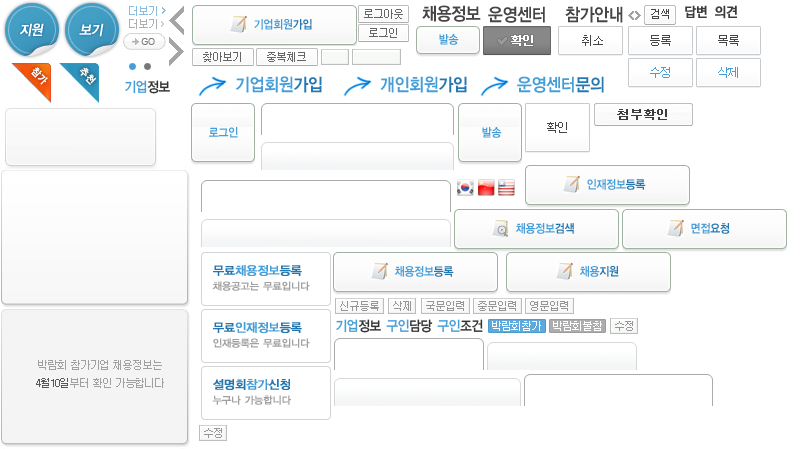
<style>
.page{position:relative;width:800px;height:449px;background:#ffffff}
.page>*{position:absolute;margin:0}
.t1{font:18px "YDIYGO140-KSCpc-EUC-H";letter-spacing:-0.1em;color:#454545;scale:0.9 1}
.t2{font:14px "YDIYGO130-KSCpc-EUC-H";letter-spacing:-0.1em;color:#3b3b3b;font-weight:bold;scale:0.9 1}
.t3{font:14px "YDIYGO130-KSCpc-EUC-H";letter-spacing:-0.1em;color:#ffffff;font-weight:bold;font-style:italic;scale:0.9 1}
.t4{font:12px "YDIYGO140-KSCpc-EUC-H";letter-spacing:-0.1em;color:#469ed9;scale:0.9 1}
.t5{font:12px "Dotum";letter-spacing:-0.1em;color:#454545}
.t6{font:10px "YDIYGO130-KSCpc-EUC-H";letter-spacing:-0.05em;color:#ffffff;font-weight:bold;scale:0.9 1}
.t7{font:18px "YDIYGO140-KSCpc-EUC-H";letter-spacing:-0.1em;color:#469ed9;scale:0.9 1}
.t8{font:18px "YDIYGO140-KSCpc-EUC-H";letter-spacing:-0.1em;color:#2479b2;scale:0.9 1}
.t9{font:12px "Dotum";letter-spacing:-0.1em;color:#469ed9}
.t10{font:14px "YDIYGO130-KSCpc-EUC-H";letter-spacing:-0.1em;color:#469ed9;scale:0.9 1}
.t11{font:14px "YDIYGO130-KSCpc-EUC-H";letter-spacing:-0.1em;color:#333333;scale:0.9 1}
.t12{font:12px "Dotum";color:#3e3c3e;font-weight:bold}
.t13{font:12px "YDIYGO140-KSCpc-EUC-H";letter-spacing:-0.1em;color:#2677ae;scale:0.9 1}
.t14{font:12px "YDIYGO130-KSCpc-EUC-H";letter-spacing:-0.1em;color:#469ed9;font-weight:bold}
.t15{font:12px "YDIYGO130-KSCpc-EUC-H";letter-spacing:-0.1em;color:#2476ad;font-weight:bold}
.t16{font:10px "YDIYGO130-KSCpc-EUC-H";letter-spacing:-0.1em;color:#a1a1a1;font-weight:bold}
.t17{font:11px "Dotum";letter-spacing:-0.1em;color:#969696}
.t18{font:11px "Dotum";letter-spacing:-0.1em;color:#ffffff}
</style>
<div class="page">
<p class="t1" style="left:422px;top:5px;width:59px;height:17px">채용정보</p>
<p class="t1" style="left:488px;top:6px;width:57px;height:17px">운영센터</p>
<p class="t1" style="left:565px;top:6px;width:58px;height:17px">참가안내</p>
<p class="t2" style="left:685px;top:5px;width:22px;height:13px">답변</p>
<p class="t2" style="left:715px;top:5px;width:22px;height:14px">의견</p>
<p class="t3" style="left:20px;top:23px;width:24px;height:14px">지원</p>
<p class="t3" style="left:79px;top:23px;width:25px;height:14px">보기</p>
<p class="t4" style="left:439px;top:34px;width:20px;height:11px">발송</p>
<p class="t5" style="left:650px;top:35px;width:21px;height:11px">등록</p>
<p class="t5" style="left:718px;top:35px;width:21px;height:11px">목록</p>
<p class="t6" style="left:31px;top:67px;width:17px;height:18px;rotate:45deg">참가</p>
<p class="t6" style="left:79px;top:67px;width:18px;height:18px;rotate:45deg">추천</p>
<p class="t7" style="left:235px;top:76px;width:87px;height:17px">기업회원<span class="t8">가입</span></p>
<p class="t7" style="left:380px;top:76px;width:87px;height:17px">개인회원<span class="t8">가입</span></p>
<p class="t7" style="left:517px;top:76px;width:87px;height:17px">운영센터<span class="t8">문의</span></p>
<p class="t9" style="left:650px;top:67px;width:20px;height:11px">수정</p>
<p class="t9" style="left:718px;top:67px;width:20px;height:11px">삭제</p>
<p class="t10" style="left:125px;top:80px;width:45px;height:14px">기업<span class="t11">정보</span></p>
<p class="t12" style="left:617px;top:109px;width:50px;height:11px">첨부확인</p>
<p class="t5" style="left:547px;top:122px;width:20px;height:11px">확인</p>
<p class="t4" style="left:209px;top:127px;width:29px;height:11px">로그인</p>
<p class="t4" style="left:482px;top:127px;width:20px;height:11px">발송</p>
<p class="t4" style="left:587px;top:179px;width:59px;height:11px">인재정보<span class="t13">등록</span></p>
<p class="t4" style="left:515px;top:223px;width:59px;height:11px">채용정보<span class="t13">검색</span></p>
<p class="t4" style="left:691px;top:223px;width:39px;height:11px">면접<span class="t13">요청</span></p>
<p class="t14" style="left:213px;top:265px;width:89px;height:11px"><span class="t15">무료</span>채용정보<span class="t15">등록</span></p>
<p class="t4" style="left:394px;top:266px;width:60px;height:11px">채용정보<span class="t13">등록</span></p>
<p class="t4" style="left:579px;top:266px;width:40px;height:11px">채용<span class="t13">지원</span></p>
<p class="t16" style="left:212px;top:281px;width:98px;height:10px">채용공고는 무료입니다</p>
<p class="t17" style="left:340px;top:301px;width:39px;height:10px">신규등록</p>
<p class="t17" style="left:426px;top:301px;width:38px;height:10px">국문입력</p>
<p class="t17" style="left:478px;top:301px;width:38px;height:10px">중문입력</p>
<p class="t17" style="left:530px;top:301px;width:38px;height:10px">영문입력</p>
<p class="t14" style="left:213px;top:322px;width:89px;height:11px"><span class="t15">무료</span>인재정보<span class="t15">등록</span></p>
<p class="t10" style="left:336px;top:319px;width:45px;height:14px">기업<span class="t11">정보</span></p>
<p class="t10" style="left:386px;top:319px;width:47px;height:14px">구인<span class="t11">담당</span></p>
<p class="t10" style="left:437px;top:319px;width:46px;height:14px">구인<span class="t11">조건</span></p>
<p class="t18" style="left:492px;top:321px;width:49px;height:10px">박람회참가</p>
<p class="t18" style="left:553px;top:321px;width:49px;height:10px">박람회불참</p>
<p class="t16" style="left:213px;top:338px;width:97px;height:10px">인재등록은 무료입니다</p>
<p class="t15" style="left:213px;top:379px;width:77px;height:11px">설명회<span class="t14">참가</span>신청</p>
<p class="t16" style="left:212px;top:395px;width:79px;height:10px">누구나 가능합니다</p>
</div>
